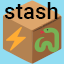
<style>
.page{position:relative;width:64px;height:64px;background:#91ddf2}
.page>*{position:absolute;margin:0}
.t1{font:22.3px "Roboto-Medium";color:#000000}
</style>
<div class="page">
<p class="t1" style="left:4px;top:2px;width:54px;height:17px">stash</p>
</div>
